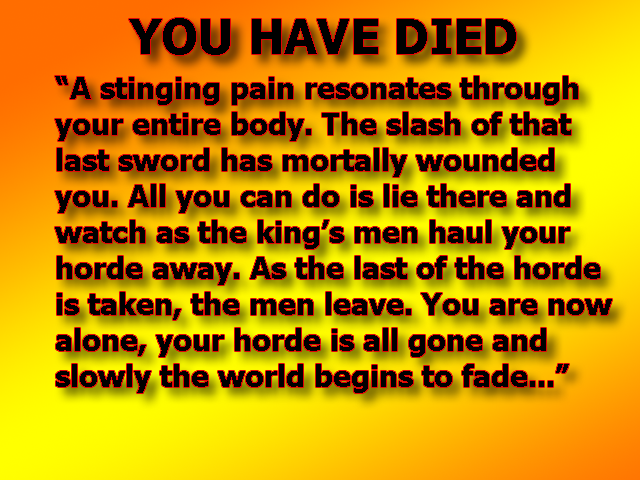
<style>
.page{position:relative;width:640px;height:480px}
.page>*{position:absolute;margin:0}
.t1{font:48px "Tahoma-Bold";color:#000000}
.t2{font:30px "Tahoma-Bold";color:#000000}
</style>
<div class="page">
<p class="t1" style="left:129px;top:18px;width:387px;height:37px">YOU HAVE DIED</p>
<p class="t2" style="left:55px;top:76px;width:557px;height:317px">“A stinging pain resonates through<br>your entire body. The slash of that<br>last sword has mortally wounded<br>you. All you can do is lie there and<br>watch as the king’s men haul your<br>horde away. As the last of the horde<br>is taken, the men leave. You are now<br>alone, your horde is all gone and <br>slowly the world begins to fade...”</p>
</div>
